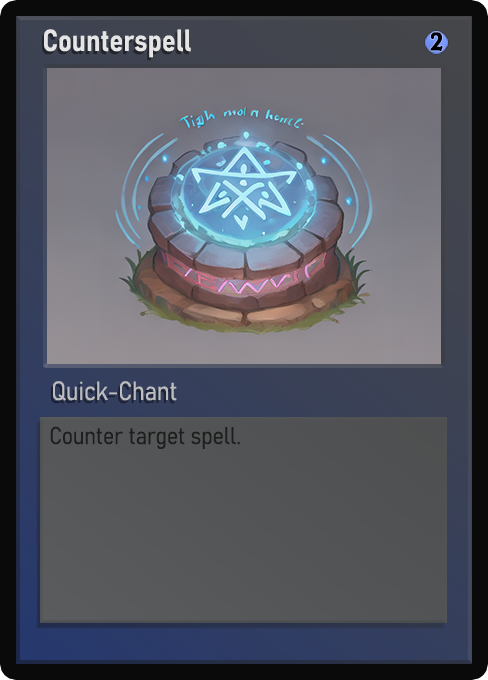
<style>
.page{position:relative;width:488px;height:680px}
.page>*{position:absolute;margin:0}
.t1{font:30px "Bahnschrift-SemiBoldSemiCondensed";color:#f2f2f2;font-weight:bold}
.t2{font:25px "WTRRoycroft";color:#000000;font-weight:bold;scale:1.09 1}
.t3{font:26px "Bahnschrift-LightSemiCondensed";color:#c8c8c8;font-weight:bold}
.t4{font:24px "Bahnschrift-LightSemiCondensed";color:#1e1e1e;font-weight:bold}
</style>
<div class="page">
<p class="t1" style="left:44px;top:29px;width:147px;height:29px;opacity:0.9">Counterspell</p>
<p class="t2" style="left:430px;top:32px;width:13px;height:19px">2</p>
<p class="t3" style="left:53px;top:381px;width:124px;height:20px;opacity:0.9">Quick-Chant</p>
<p class="t4" style="left:50px;top:426px;width:190px;height:23px">Counter target spell.</p>
</div>
